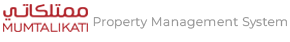
<style>
.page{position:relative;width:290px;height:42px;background:#ffffff}
.page>*{position:absolute;margin:0}
.t1{font:12.6px "Montserrat-Regular";letter-spacing:0.02em;color:#929292;scale:0.97 1}
</style>
<div class="page">
<p class="t1" style="left:93px;top:17px;width:194px;height:12px">Property Management System</p>
</div>
